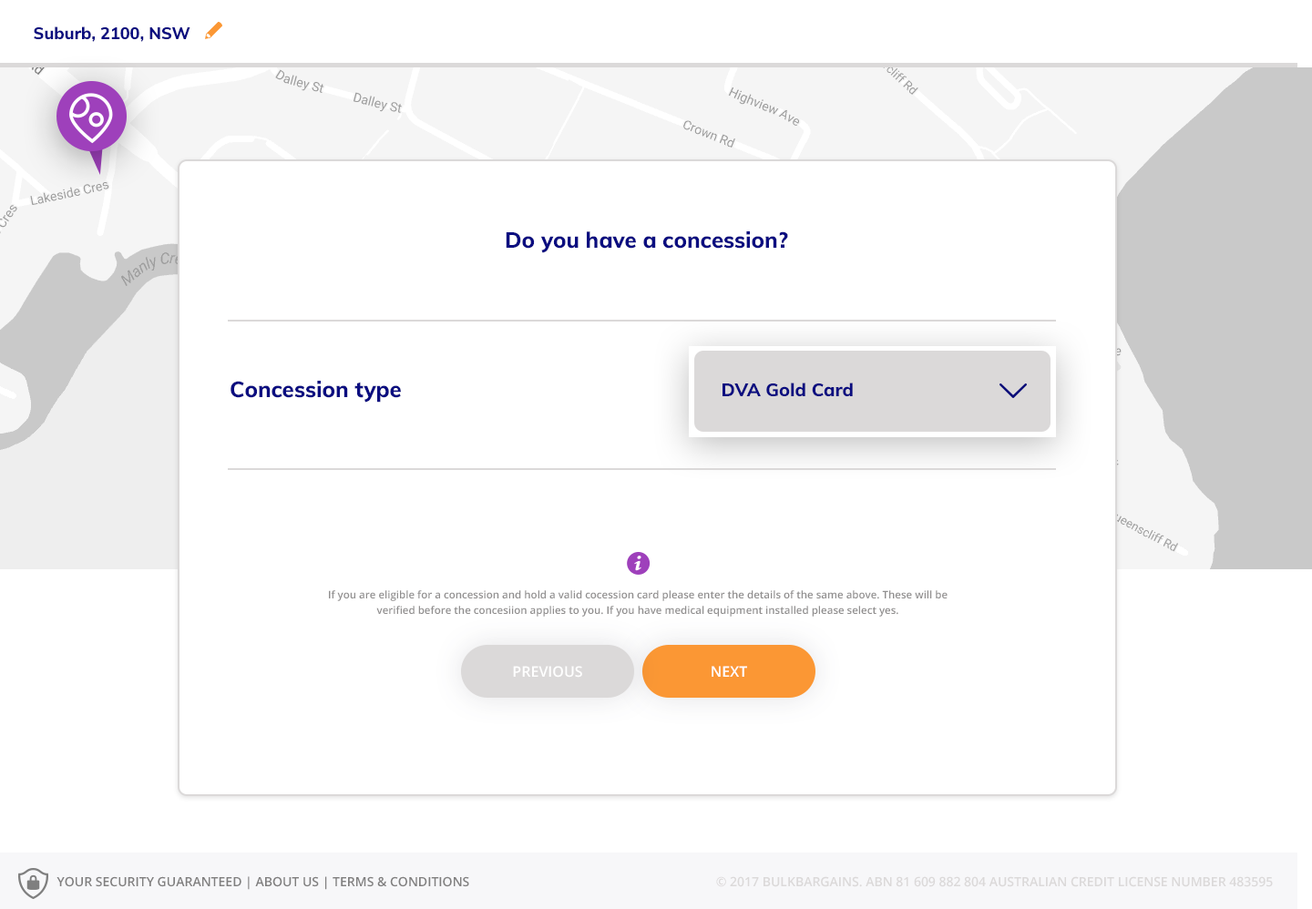
<style>
.page{position:relative;width:1312px;height:909px;background:#ffffff}
.page>*{position:absolute;margin:0}
.t1{font:16.4px "Muli-ExtraBold";color:#0a0d80}
.t2{font:21.9px "Muli-ExtraBold";color:#0a0d80}
.t3{font:18.1px "Muli-ExtraBold";color:#0a0d80}
.t4{font:10.5px/15.1px "OpenSans-Semibold";color:#918f8f}
.t5{font:14.6px "OpenSans-Semibold";color:#ffffff;text-transform:uppercase}
.t6{font:12.8px "OpenSans-Semibold";color:#807f7f;text-transform:uppercase}
.t7{font:12.8px "OpenSans-Semibold";color:#dbd9d9;text-transform:uppercase}
</style>
<div class="page">
<p class="t1" style="left:34px;top:26px;width:156px;height:16px">Suburb, 2100, NSW</p>
<p class="t2" style="left:506px;top:231px;width:282px;height:22px">Do you have a concession?</p>
<p class="t2" style="left:230px;top:381px;width:171px;height:22px">Concession type</p>
<p class="t3" style="left:722px;top:383px;width:131px;height:14px">DVA Gold Card</p>
<p class="t4" style="left:329px;top:590px;width:618px;height:27px;text-align:center">If you are eligible for a concession and hold a valid cocession card please enter the details of the same above. These will be verified before the concesiion applies to you. If you have medical equipment installed please select yes.</p>
<p class="t5" style="left:513px;top:666px;width:69px;height:12px">Previous</p>
<p class="t5" style="left:711px;top:666px;width:36px;height:11px">NEXT</p>
<p class="t6" style="left:56px;top:876px;width:413px;height:14px">Your security guaranteed | about us | Terms &amp; Conditions</p>
<p class="t7" style="left:716px;top:876px;width:557px;height:11px">© 2017 Bulkbargains. ABN 81 609 882 804 Australian Credit License Number 483595</p>
</div>
